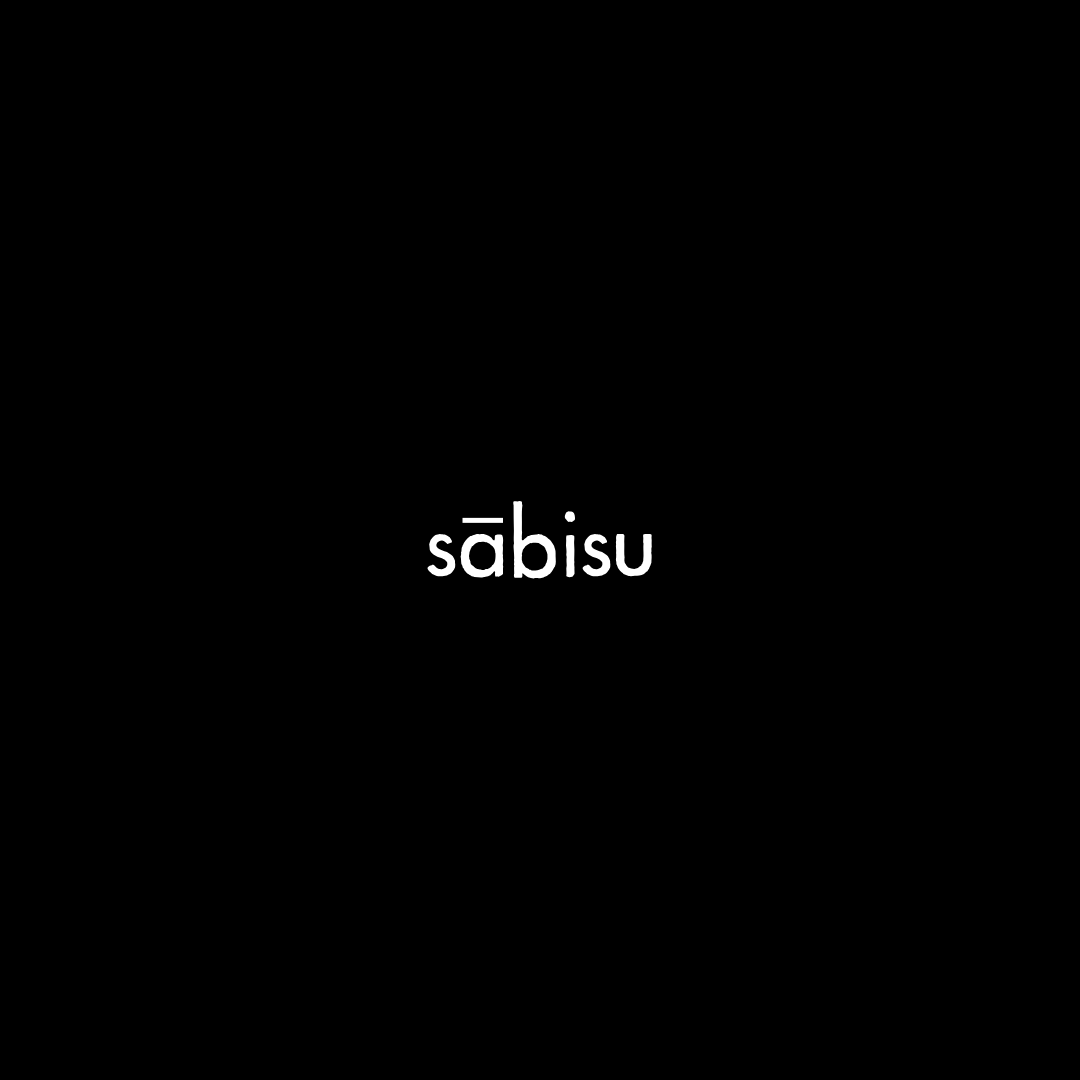
<style>
.page{position:relative;width:1080px;height:1080px;background:#000000}
.page>*{position:absolute;margin:0}
.t1{font:100px "FuturaRenner-Regular";color:#ffffff}
</style>
<div class="page">
<p class="t1" style="left:427px;top:500px;width:226px;height:79px">sabisu</p>
</div>
